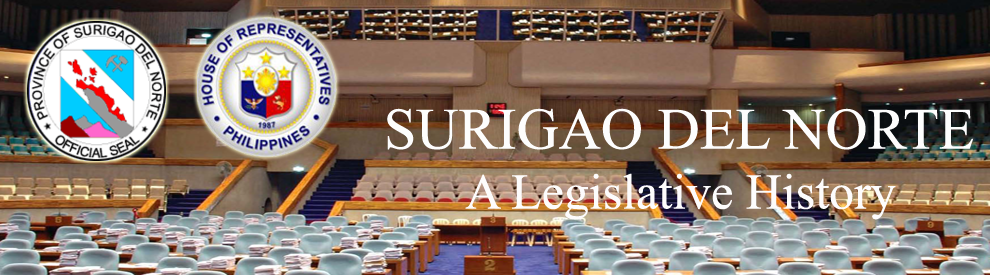
<style>
.page{position:relative;width:990px;height:275px}
.page>*{position:absolute;margin:0}
.t1{font:50px "TimesNewRomanPSMT";color:#fdfcfc}
.t2{font:58.3px "TimesNewRomanPSMT";color:#fdfdfd}
</style>
<div class="page">
<p class="t1" style="left:387px;top:108px;width:587px;height:112px;text-align:center"><span class="t2">SURIGAO DEL NORTE<br></span>A Legislative History</p>
</div>
